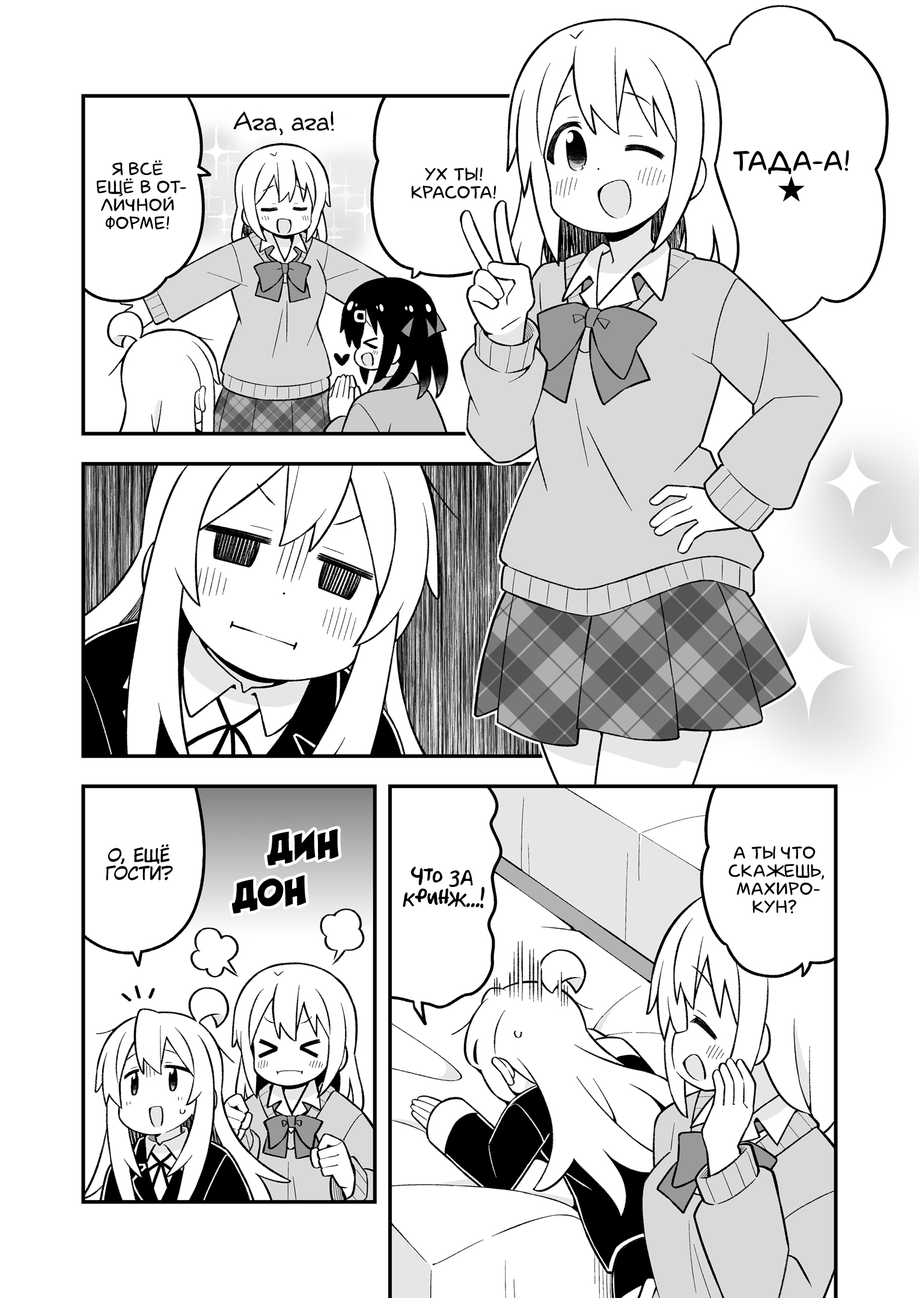
<style>
.page{position:relative;width:919px;height:1298px;background:#ffffff}
.page>*{position:absolute;margin:0}
.t1{font:25.2px "v_Augie";color:#000000}
.t2{font:18px "laCartoonerie";color:#000000;text-transform:uppercase}
.t3{font:28.8px "laCartoonerie";color:#000000;text-transform:uppercase}
.t4{font:28.8px "KozGoPr6N-Regular";color:#000000;text-transform:uppercase}
.t5{font:36.1px "v_CCRatatatat";color:#000000;text-transform:uppercase}
.t6{font:18px "KuraiVoice2";color:#000000;text-transform:uppercase}
.t7{font:21.6px "AkbarPlain";color:#000000}
</style>
<div class="page">
<p class="t1" style="left:233px;top:111px;width:101px;height:24px">Ага, ага!</p>
<p class="t2" style="left:97px;top:160px;width:89px;height:70px;text-align:center">Я всё<br>ещё в от-<br>личной<br>форме!</p>
<p class="t3" style="left:733px;top:150px;width:116px;height:52px;text-align:center">Тада-а!<br><span class="t4">★</span></p>
<p class="t2" style="left:411px;top:167px;width:85px;height:32px;text-align:center">Ух ты!<br>Красота!</p>
<p class="t5" style="left:267px;top:829px;width:72px;height:37px;rotate:-2deg">дин</p>
<p class="t6" style="left:106px;top:844px;width:67px;height:36px;text-align:center">О, ещё<br>гости?</p>
<p class="t2" style="left:728px;top:845px;width:96px;height:68px;text-align:center">А ты что<br>скажешь,<br>Махиро-<br>кун?</p>
<p class="t7" style="left:403px;top:866px;width:81px;height:43px;text-align:center">Что за<br>кринж...!</p>
<p class="t5" style="left:232px;top:875px;width:74px;height:39px;rotate:-3deg">дон</p>
</div>
